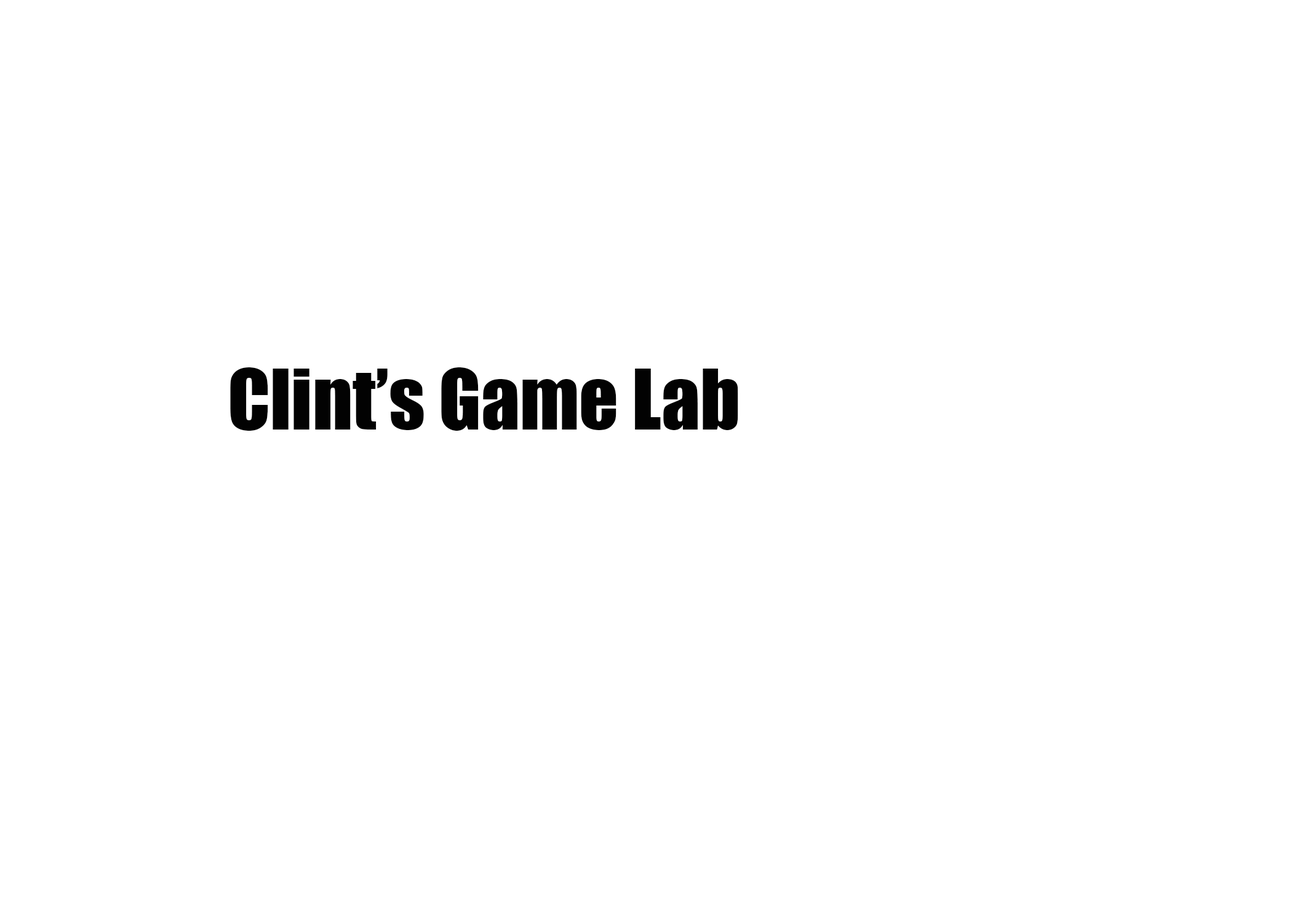
<style>
.page{position:relative;width:1292px;height:923px;background:#ffffff}
.page>*{position:absolute;margin:0}
.t1{font:76.9px "Impact";color:#020202}
</style>
<div class="page">
<p class="t1" style="left:230px;top:367px;width:508px;height:64px">Clint’s Game Lab</p>
</div>
